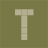
<style>
.page{position:relative;width:48px;height:48px;background:#787746}
.page>*{position:absolute;margin:0}
.t1{font:46px "3x5";color:#b4af91;text-transform:uppercase}
</style>
<div class="page">
<p class="t1" style="left:15px;top:9px;width:19px;height:31px">T</p>
</div>
